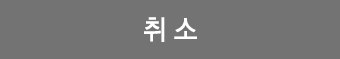
<style>
.page{position:relative;width:340px;height:59px;background:#737373}
.page>*{position:absolute;margin:0}
.t1{font:28px "YDVYGO33";letter-spacing:-0.025em;color:#ffffff;scale:0.91 1}
</style>
<div class="page">
<p class="t1" style="left:144px;top:17px;width:53px;height:25px">취 소</p>
</div>
